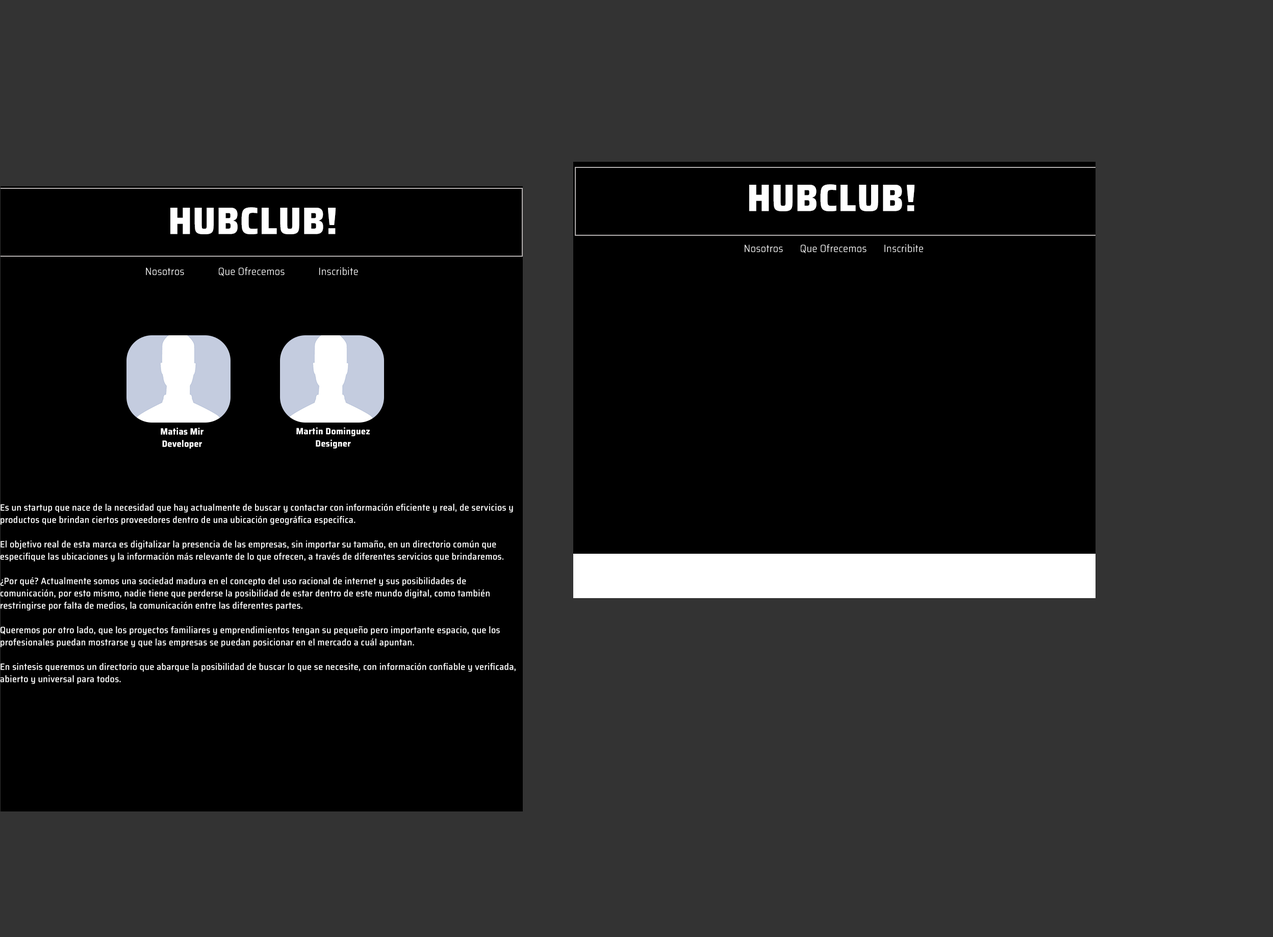
<style>
.page{position:relative;width:1273px;height:937px;background:#333333}
.page>*{position:absolute;margin:0}
.t1{font:38.3px "SairaSemiCondensed-ExtraBold";letter-spacing:0.025em;color:#ffffff}
.t2{font:23px "SairaSemiCondensed-ExtraBold";letter-spacing:0.025em;color:#ffffff}
.t3{font:10.2px "SairaSemiCondensed-Light";letter-spacing:0.025em;color:#ffffff}
.t4{font:10.2px "SairaSemiCondensed-ExtraBold";letter-spacing:0.025em;color:#ffffff}
.t5{font:9.2px/12.2px "SairaSemiCondensed-Bold";letter-spacing:0.025em;color:#ffffff}
.t6{font:9.2px/12.2px "SairaSemiCondensed-Medium";letter-spacing:0.025em;color:#ffffff}
</style>
<div class="page">
<p class="t1" style="left:749px;top:184px;width:166px;height:27px"><span class="t2"><br></span>HUBCLUB!</p>
<p class="t1" style="left:170px;top:207px;width:166px;height:27px"><span class="t2"><br></span>HUBCLUB!</p>
<p class="t3" style="left:745px;top:244px;width:178px;height:9px"><span class="t4"><br></span>Nosotros       Que Ofrecemos       Inscribite</p>
<p class="t3" style="left:146px;top:267px;width:212px;height:9px"><span class="t4"><br></span>Nosotros              Que Ofrecemos              Inscribite</p>
<p class="t5" style="left:161px;top:427px;width:43px;height:21px;text-align:center">Matias Mir<br>Developer</p>
<p class="t5" style="left:296px;top:427px;width:74px;height:21px;text-align:center">Martin Dominguez<br>Designer</p>
<p class="t6" style="left:0px;top:503px;width:516px;height:181px">Es un startup que nace de la necesidad que hay actualmente de buscar y contactar con información eficiente y real, de servicios y productos que brindan ciertos proveedores dentro de una ubicación geográfica especifica.<br><br>El objetivo real de esta marca es digitalizar la presencia de las empresas, sin importar su tamaño, en un directorio común que especifique las ubicaciones y la información más relevante de lo que ofrecen, a través de diferentes servicios que brindaremos.<br><br>¿Por qué? Actualmente somos una sociedad madura en el concepto del uso racional de internet y sus posibilidades de comunicación, por esto mismo, nadie tiene que perderse la posibilidad de estar dentro de este mundo digital, como también restringirse por falta de medios, la comunicación entre las diferentes partes.<br><br>Queremos por otro lado, que los proyectos familiares y emprendimientos tengan su pequeño pero importante espacio, que los profesionales puedan mostrarse y que las empresas se puedan posicionar en el mercado a cuál apuntan.<br><br>En sintesis queremos un directorio que abarque la posibilidad de buscar lo que se necesite, con información confiable y verificada, abierto y universal para todos.</p>
</div>
